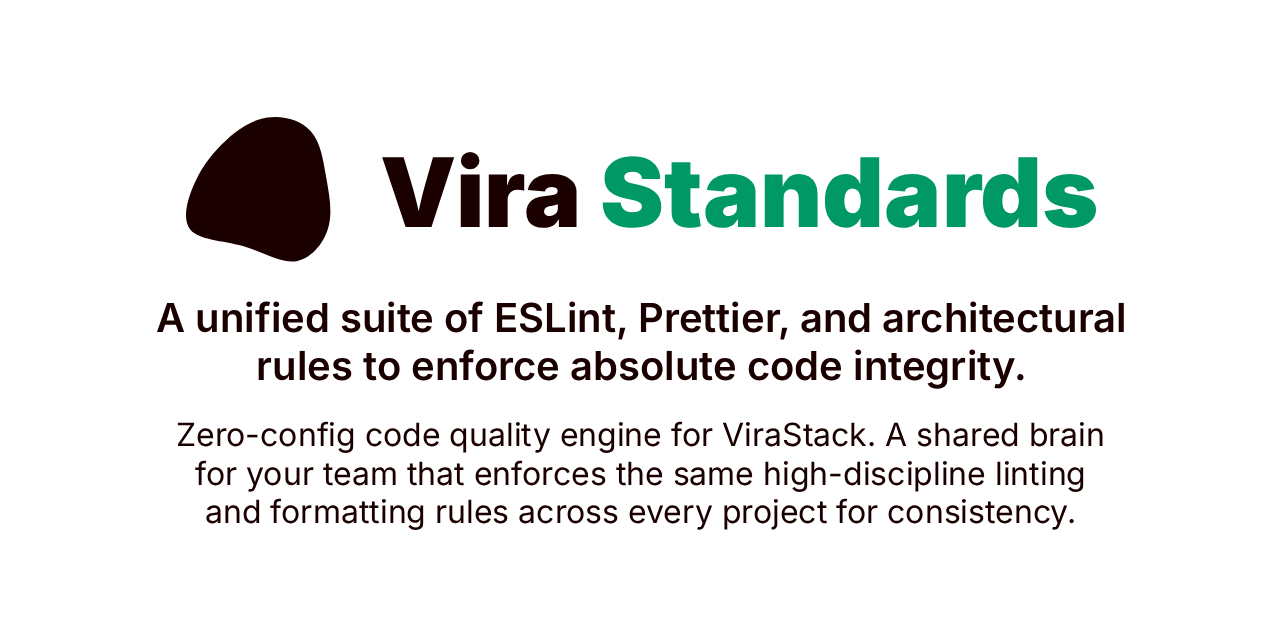
<style>
.page{position:relative;width:1280px;height:640px;background:#ffffff}
.page>*{position:absolute;margin:0}
.t1{font:96px "Inter-Black";color:#009966}
.t2{font:96px "Inter-Black";color:#1b0000}
.t3{font:40px "Inter-SemiBold";color:#1b0000}
.t4{font:32px "Inter-Regular";color:#1b0000}
</style>
<div class="page">
<p class="t1" style="left:382px;top:152px;width:714px;height:76px"><span class="t2">Vira </span>Standards</p>
<p class="t3" style="left:156px;top:301px;width:968px;height:88px;text-align:center">A unified suite of ESLint, Prettier, and architectural rules to enforce absolute code integrity.</p>
<p class="t4" style="left:177px;top:421px;width:926px;height:109px;text-align:center">Zero-config code quality engine for ViraStack. A shared brain for your team that enforces the same high-discipline linting and formatting rules across every project for consistency.</p>
</div>
